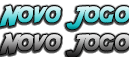
<style>
.page{position:relative;width:129px;height:57px;background:#ffffff}
.page>*{position:absolute;margin:0}
.t1{font:26px "Adventure";font-weight:bold}
</style>
<div class="page">
<p class="t1" style="left:0px;top:5px;width:131px;height:25px">Novo Jogo</p>
</div>
